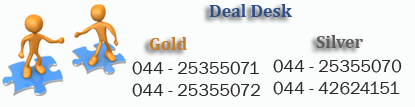
<style>
.page{position:relative;width:415px;height:107px;background:#fbfcfc}
.page>*{position:absolute;margin:0}
.t1{font:18px "Cambria-Bold";color:#2f5087}
.t2{font:18px "Cambria-Bold";color:#c67b27}
.t3{font:18px "Cambria-Bold";color:#605f5e}
.t4{font:18px "FranklinGothic-Book";color:#2a2a2a}
</style>
<div class="page">
<p class="t1" style="left:209px;top:4px;width:83px;height:13px">Deal Desk</p>
<p class="t2" style="left:149px;top:37px;width:38px;height:13px">Gold</p>
<p class="t3" style="left:316px;top:35px;width:47px;height:13px">Silver</p>
<p class="t4" style="left:132px;top:61px;width:128px;height:36px">044 - 25355071<br>044 - 25355072</p>
<p class="t4" style="left:273px;top:59px;width:129px;height:36px">044 - 25355070<br>044 - 42624151</p>
</div>
